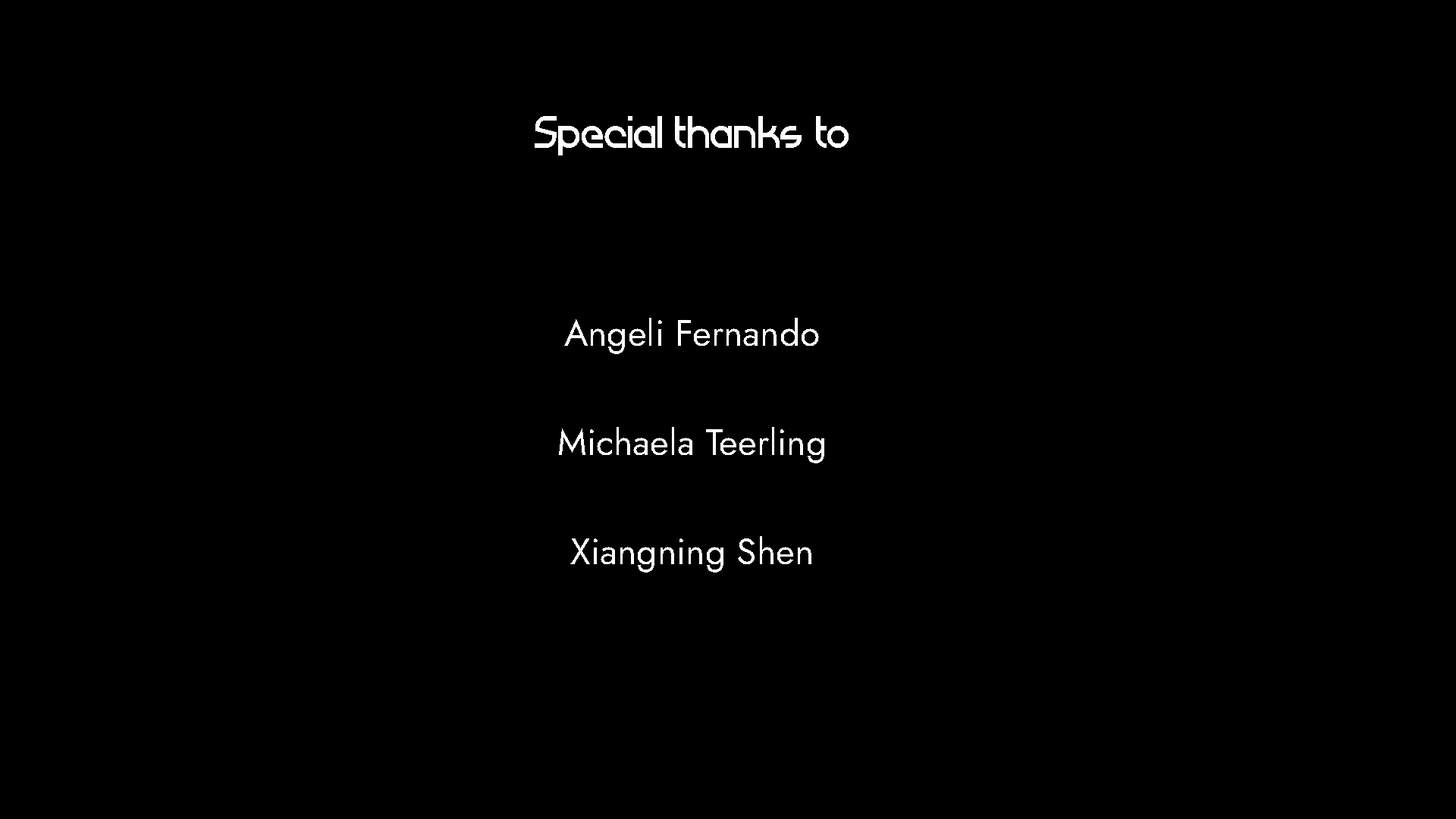
<style>
.page{position:relative;width:1456px;height:819px;background:#000000}
.page>*{position:absolute;margin:0}
.t1{font:36.4px "Atiba-Regular";color:#ffffff}
.t2{font:36.4px/54.6px "Jost-Book";color:#ffffff}
</style>
<div class="page">
<p class="t1" style="left:535px;top:116px;width:314px;height:39px">Special thanks to</p>
<p class="t2" style="left:559px;top:318px;width:265px;height:255px;text-align:center">Angeli Fernando<br><br>Michaela Teerling<br><br>Xiangning Shen</p>
</div>
